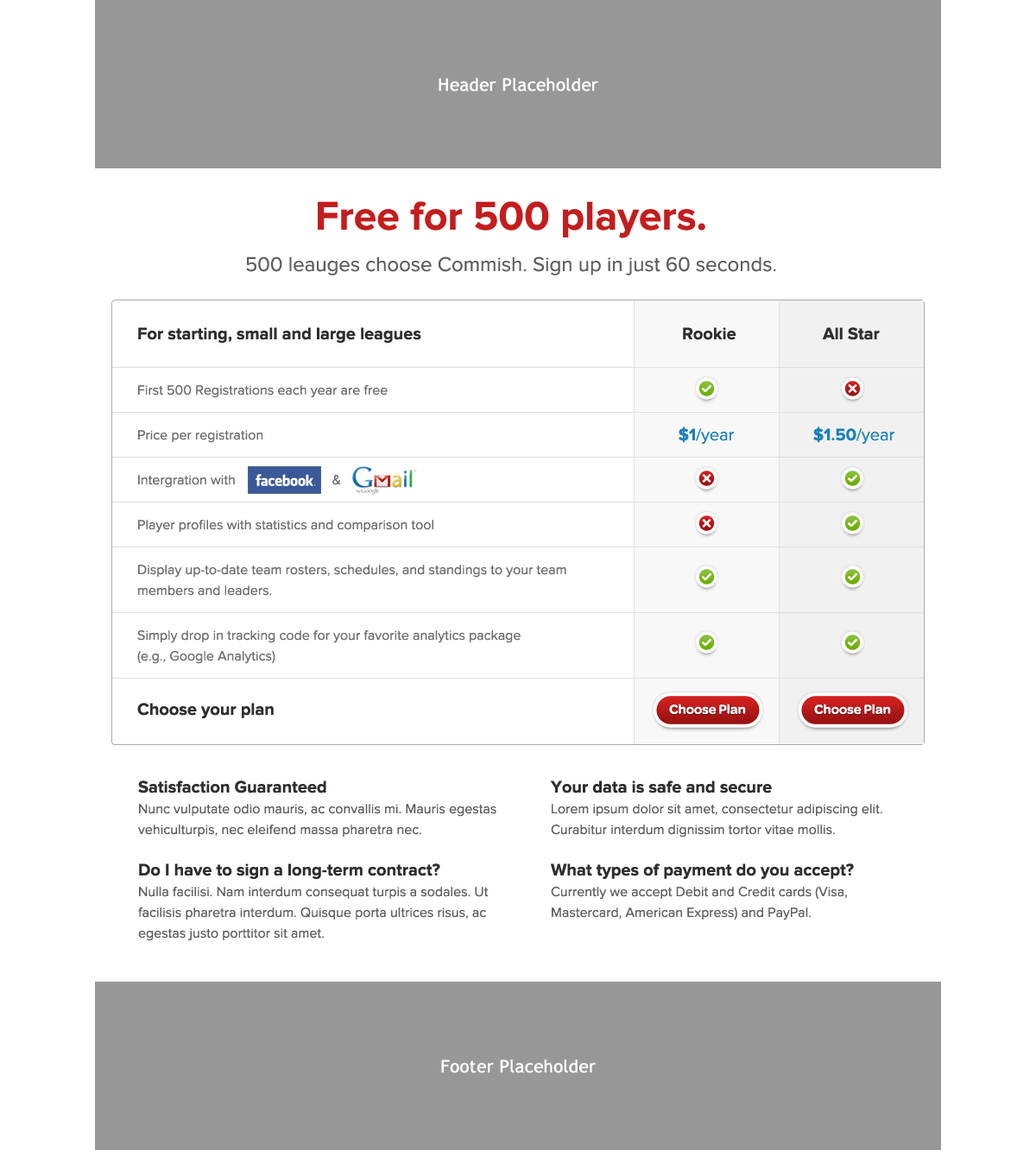
<style>
.page{position:relative;width:1036px;height:1150px;background:#ffffff}
.page>*{position:absolute;margin:0}
.t1{font:17.3px "TrebuchetMS";color:#ffffff;font-weight:bold}
.t2{font:41.5px "ProximaNova-Bold";color:#c41d1d}
.t3{font:20.7px "ProximaNova-Regular";color:#5e5e5e}
.t4{font:17.3px "ProximaNova-Bold";color:#2e2e2e}
.t5{font:13.8px "ProximaNova-Regular";color:#6c6c6c}
.t6{font:17.3px "ProximaNova-Regular";color:#1c80b9}
.t7{font:17.3px "ProximaNova-Bold";color:#1c80b9}
.t8{font:13.8px/20.7px "ProximaNova-Regular";color:#6c6c6c}
.t9{font:13.8px "Omnes-Semibold";color:#ffffff}
.t10{font:13.8px/20.7px "ProximaNova-Regular";color:#5e5e5e}
.t11{font:17.3px/20.7px "ProximaNova-Bold";color:#2e2e2e}
</style>
<div class="page">
<p class="t1" style="left:439px;top:78px;width:160px;height:14px">Header Placeholder</p>
<p class="t2" style="left:318px;top:201px;width:388px;height:37px">Free for 500 players.</p>
<p class="t3" style="left:246px;top:257px;width:530px;height:19px">500 leauges choose Commish. Sign up in just 60 seconds.</p>
<p class="t4" style="left:138px;top:327px;width:283px;height:16px">For starting, small and large leagues</p>
<p class="t4" style="left:683px;top:327px;width:54px;height:13px">Rookie</p>
<p class="t4" style="left:822px;top:327px;width:58px;height:13px">All Star</p>
<p class="t5" style="left:138px;top:385px;width:250px;height:13px">First 500 Registrations each year are free</p>
<p class="t5" style="left:138px;top:430px;width:125px;height:13px">Price per registration</p>
<p class="t6" style="left:679px;top:427px;width:55px;height:17px"><span class="t7">$1</span>/year</p>
<p class="t7" style="left:814px;top:427px;width:81px;height:17px">$1.50<span class="t6">/year</span></p>
<p class="t5" style="left:138px;top:475px;width:203px;height:13px">Intergration with                           &amp;</p>
<p class="t5" style="left:138px;top:520px;width:296px;height:13px">Player profiles with statistics and comparison tool</p>
<p class="t8" style="left:138px;top:565px;width:429px;height:31px">Display up-to-date team rosters, schedules, and standings to your team <br>members and leaders.</p>
<p class="t8" style="left:137px;top:631px;width:384px;height:33px">Simply drop in tracking code for your favorite analytics package <br>(e.g., Google Analytics)</p>
<p class="t4" style="left:137px;top:703px;width:137px;height:16px">Choose your plan</p>
<p class="t9" style="left:669px;top:704px;width:77px;height:11px">Choose Plan</p>
<p class="t9" style="left:814px;top:704px;width:77px;height:11px">Choose Plan</p>
<p class="t10" style="left:138px;top:781px;width:359px;height:160px"><span class="t11">Satisfaction Guaranteed<br></span>Nunc vulputate odio mauris, ac convallis mi. Mauris egestas <br>vehiculturpis, nec eleifend massa pharetra nec.<br><br><span class="t11">Do I have to sign a long-term contract?<br></span>Nulla facilisi. Nam interdum consequat turpis a sodales. Ut <br>facilisis pharetra interdum. Quisque porta ultrices risus, ac <br>egestas justo porttitor sit amet.</p>
<p class="t10" style="left:550px;top:781px;width:333px;height:140px"><span class="t11">Your data is safe and secure<br></span>Lorem ipsum dolor sit amet, consectetur adipiscing elit. <br>Curabitur interdum dignissim tortor vitae mollis.<br><span class="t11"><br>What types of payment do you accept?<br></span>Currently we accept Debit and Credit cards (Visa, <br>Mastercard, American Express) and PayPal.</p>
<p class="t1" style="left:441px;top:1060px;width:155px;height:14px">Footer Placeholder</p>
</div>
